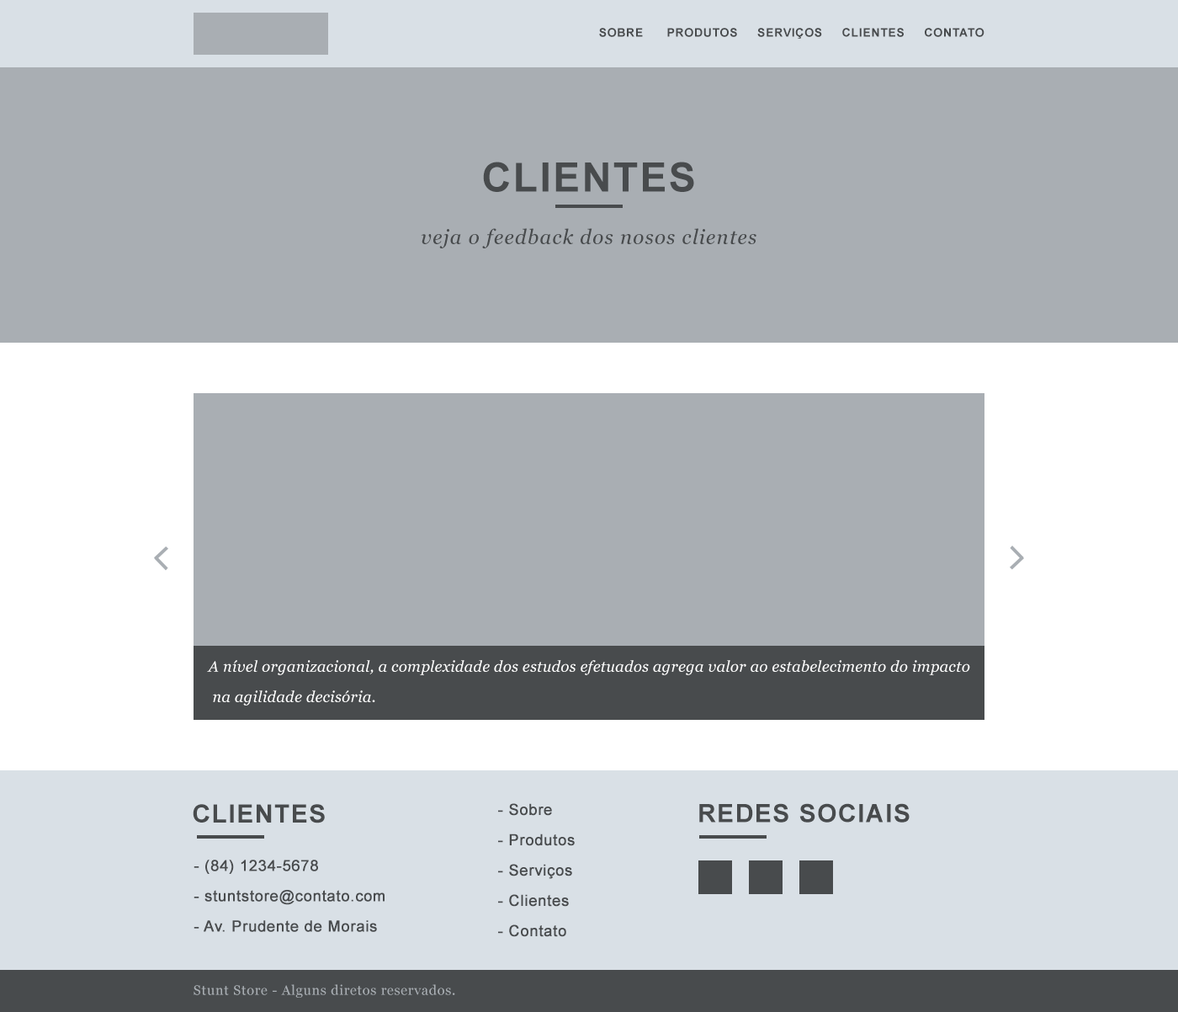
<style>
.page{position:relative;width:1178px;height:1012px;background:#a9aeb3}
.page>*{position:absolute;margin:0}
.t1{font:11.8px "Arial-BoldMT";letter-spacing:0.05em;color:#484b4d;text-transform:uppercase}
.t2{font:40.4px "Arial-BoldMT";letter-spacing:0.05em;color:#484b4d;text-transform:uppercase}
.t3{font:20.2px "Georgia-Italic";letter-spacing:0.05em;color:#484b4d}
.t4{font:15.2px/30.3px "Georgia-Italic";letter-spacing:0.025em;color:#ffffff}
.t5{font:25.3px "Arial-BoldMT";letter-spacing:0.05em;color:#484b4d;text-transform:uppercase}
.t6{font:15.2px/30.3px "ArialMT";letter-spacing:0.025em;color:#484b4d;font-weight:bold}
.t7{font:13.5px "Georgia";letter-spacing:0.05em;color:#a9aeb3}
</style>
<div class="page">
<p class="t1" style="left:599px;top:28px;width:386px;height:11px">Sobre      produtos     serviços     Clientes     contato</p>
<p class="t2" style="left:483px;top:162px;width:211px;height:30px">clientes</p>
<p class="t3" style="left:421px;top:228px;width:336px;height:20px">veja o feedback dos nosos clientes</p>
<p class="t4" style="left:207px;top:660px;width:764px;height:45px">A nível organizacional, a complexidade dos estudos efetuados agrega valor ao estabelecimento do impacto<br> na agilidade decisória.</p>
<p class="t5" style="left:193px;top:804px;width:132px;height:19px">Clientes</p>
<p class="t6" style="left:498px;top:803px;width:77px;height:134px">- Sobre<br>- Produtos<br>- Serviços<br>- Clientes<br>- Contato</p>
<p class="t5" style="left:700px;top:803px;width:210px;height:19px">Redes Sociais</p>
<p class="t6" style="left:194px;top:859px;width:191px;height:73px">- (84) 1234-5678<br>- stuntstore@contato.com<br>- Av. Prudente de Morais</p>
<p class="t7" style="left:194px;top:984px;width:261px;height:14px">Stunt Store - Alguns diretos reservados.</p>
</div>
